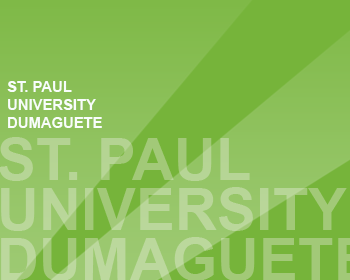
<style>
.page{position:relative;width:350px;height:280px;background:#76b43a}
.page>*{position:absolute;margin:0}
.t1{font:14.8px "Arial-BoldMT";color:#f7fcfb}
</style>
<div class="page">
<p class="t1" style="left:7px;top:81px;width:95px;height:47px">ST. PAUL<br>UNIVERSITY<br>DUMAGUETE</p>
</div>
